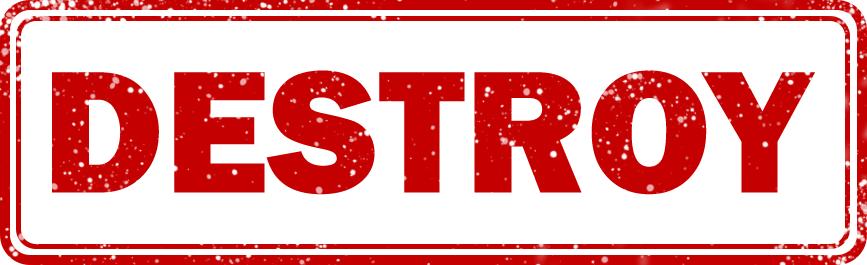
<style>
.page{position:relative;width:867px;height:265px;background:#ffffff}
.page>*{position:absolute;margin:0}
.t1{font:180px "FranklinGothic-Heavy";color:#c50000}
</style>
<div class="page">
<p class="t1" style="left:52px;top:70px;width:763px;height:125px">DESTROY</p>
</div>
